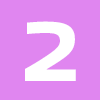
<style>
.page{position:relative;width:100px;height:100px;background:#e086f0}
.page>*{position:absolute;margin:0}
.t1{font:85px "AllumiStdExtended-ExtraBold";color:#ffffff}
</style>
<div class="page">
<p class="t1" style="left:25px;top:21px;width:51px;height:60px">2</p>
</div>
